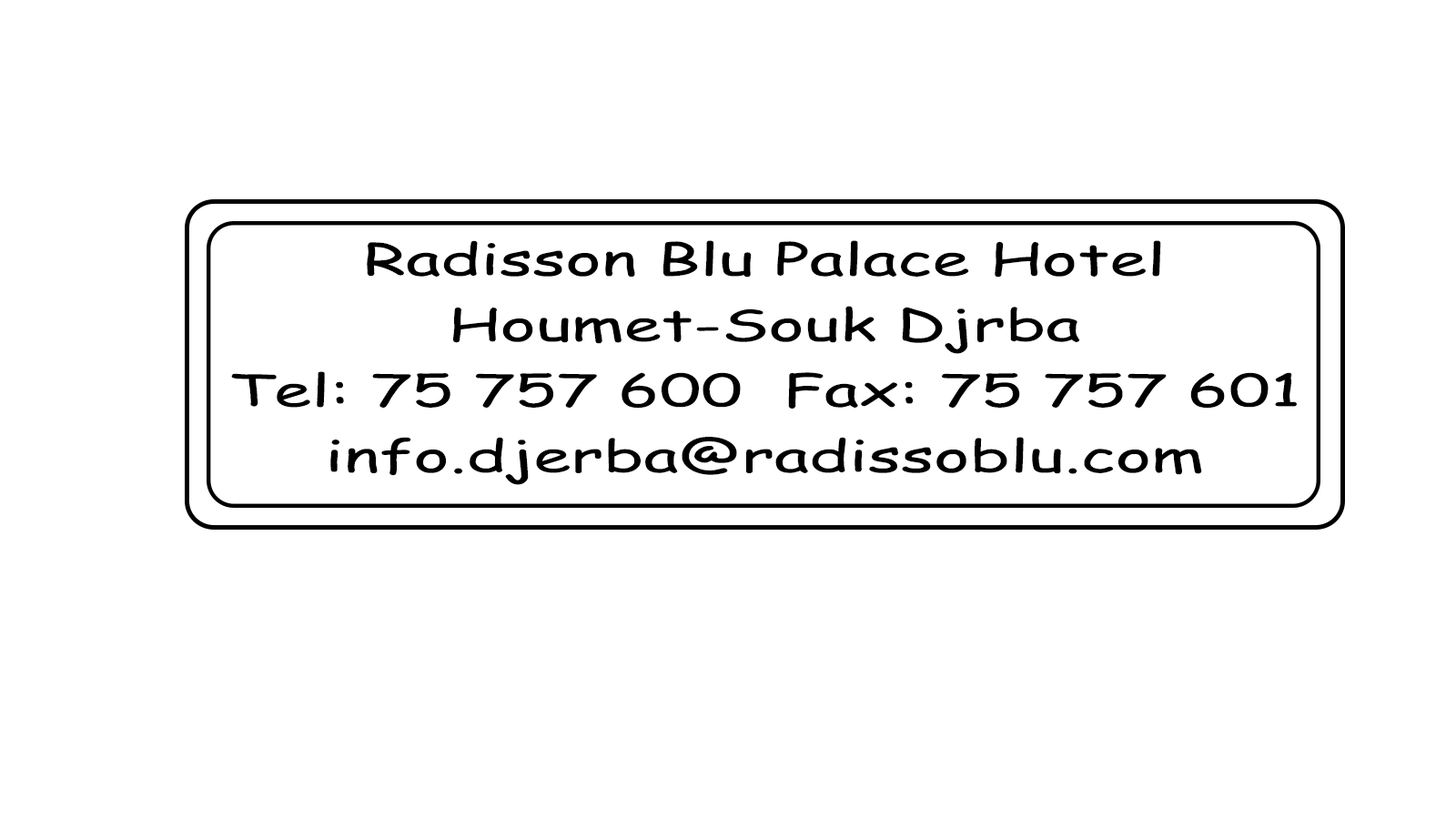
<style>
.page{position:relative;width:1456px;height:819px;background:#ffffff}
.page>*{position:absolute;margin:0}
.t1{font:43.7px/65.5px "ComicSansMS";color:#000000;scale:1.55 1}
</style>
<div class="page">
<p class="t1" style="left:231px;top:240px;width:1067px;height:245px;text-align:center">Radisson Blu Palace Hotel<br>Houmet-Souk Djrba<br>Tel: 75 757 600  Fax: 75 757 601<br>info.djerba@radissoblu.com</p>
</div>
